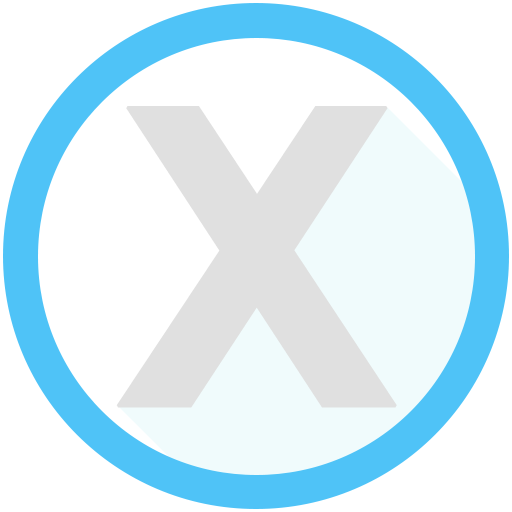
<style>
.page{position:relative;width:512px;height:512px;background:#ffffff}
.page>*{position:absolute;margin:0}
.t1{font:416.7px "Arial-BoldMT";letter-spacing:-0.04em;color:#e0e0e0;font-weight:bold}
</style>
<div class="page">
<p class="t1" style="left:116px;top:106px;width:281px;height:302px">X</p>
</div>
